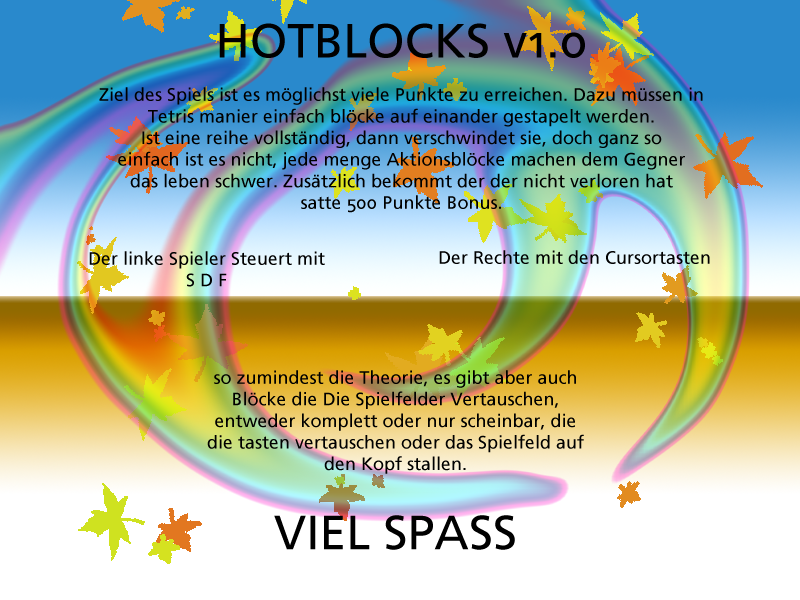
<style>
.page{position:relative;width:800px;height:600px}
.page>*{position:absolute;margin:0}
.t1{font:18px "FrutigerLinotype-Roman";color:#000000}
.t2{font:48px "FrutigerLinotype-Roman";color:#000000}
</style>
<div class="page">
<p class="t1" style="left:99px;top:23px;width:604px;height:190px;text-align:center"><span class="t2">HOTBLOCKS v1.0<br></span><br>Ziel des Spiels ist es möglichst viele Punkte zu erreichen. Dazu müssen in<br>Tetris manier einfach blöcke auf einander gestapelt werden.<br>Ist eine reihe vollständig, dann verschwindet sie, doch ganz so<br>einfach ist es nicht, jede menge Aktionsblöcke machen dem Gegner<br>das leben schwer. Zusätzlich bekommt der der nicht verloren hat<br>satte 500 Punkte Bonus.</p>
<p class="t1" style="left:89px;top:251px;width:236px;height:36px;text-align:center">Der linke Spieler Steuert mit<br>S D F</p>
<p class="t1" style="left:439px;top:250px;width:271px;height:14px">Der Rechte mit den Cursortasten</p>
<p class="t1" style="left:207px;top:370px;width:377px;height:180px;text-align:center">so zumindest die Theorie, es gibt aber auch <br>Blöcke die Die Spielfelder Vertauschen,<br>entweder komplett oder nur scheinbar, die<br>die tasten vertauschen oder das Spielfeld auf <br>den Kopf stallen.<br><br><span class="t2">VIEL SPASS</span></p>
</div>
